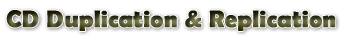
<style>
.page{position:relative;width:352px;height:40px;background:#ffffff}
.page>*{position:absolute;margin:0}
.t1{font:24px "BerlinSansFBDemi-Bold";font-weight:bold}
</style>
<div class="page">
<p class="t1" style="left:6px;top:10px;width:330px;height:21px">CD Duplication &amp; Replication</p>
</div>
